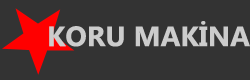
<style>
.page{position:relative;width:250px;height:80px;background:#333333}
.page>*{position:absolute;margin:0}
.t1{font:27.9px "Ebrima-Bold";color:#cccccc}
</style>
<div class="page">
<p class="t1" style="left:49px;top:21px;width:201px;height:26px">KORU MAKİNA</p>
</div>
